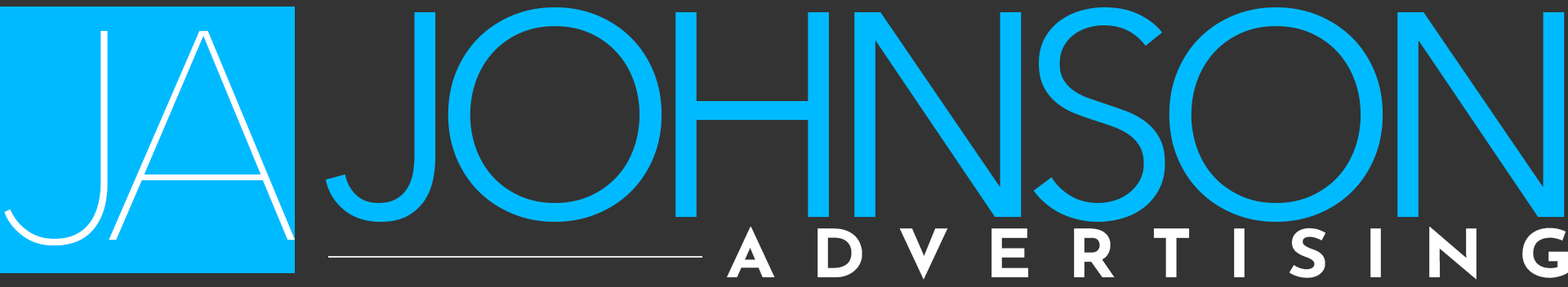
<style>
.page{position:relative;width:1568px;height:287px;background:#333333}
.page>*{position:absolute;margin:0}
.t1{font:289.1px "AvenirNext-Regular";letter-spacing:-0.1em;color:#00baff}
.t2{font:294.8px "AvenirNext-UltraLight";letter-spacing:-0.1em;color:#ffffff}
.t3{font:66.2px "JosefinSansRoman-Bold";letter-spacing:0.5em;color:#ffffff;scale:1.07 1}
</style>
<div class="page">
<p class="t1" style="left:325px;top:7px;width:1240px;height:215px">JOHNSON</p>
<p class="t2" style="left:4px;top:31px;width:291px;height:215px">JA</p>
<p class="t3" style="left:727px;top:227px;width:842px;height:53px">ADVERTISING</p>
</div>
